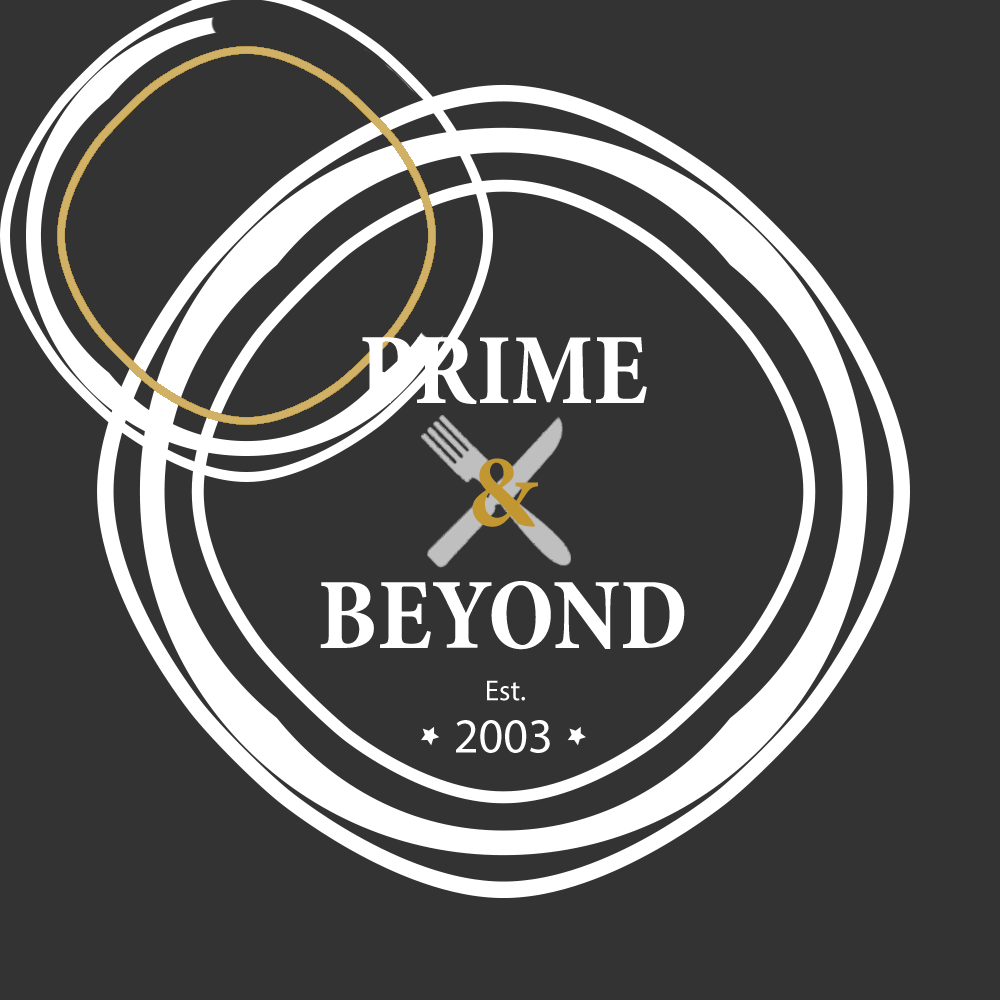
<style>
.page{position:relative;width:1000px;height:1000px;background:#333333}
.page>*{position:absolute;margin:0}
.t1{font:102px "MinionPro-BoldCn";color:#ffffff}
.t2{font:102px "MinionPro-BoldCn";color:#c29731}
.t3{font:29px "MyriadPro-Regular";color:#ffffff}
.t4{font:49.1px "MyriadPro-Regular";color:#ffffff}
</style>
<div class="page">
<p class="t1" style="left:320px;top:337px;width:365px;height:313px;text-align:center">PRIME<br><span class="t2">&amp;<br></span>BEYOND</p>
<p class="t3" style="left:487px;top:680px;width:38px;height:21px">Est.</p>
<p class="t4" style="left:456px;top:720px;width:94px;height:33px">2003</p>
</div>
